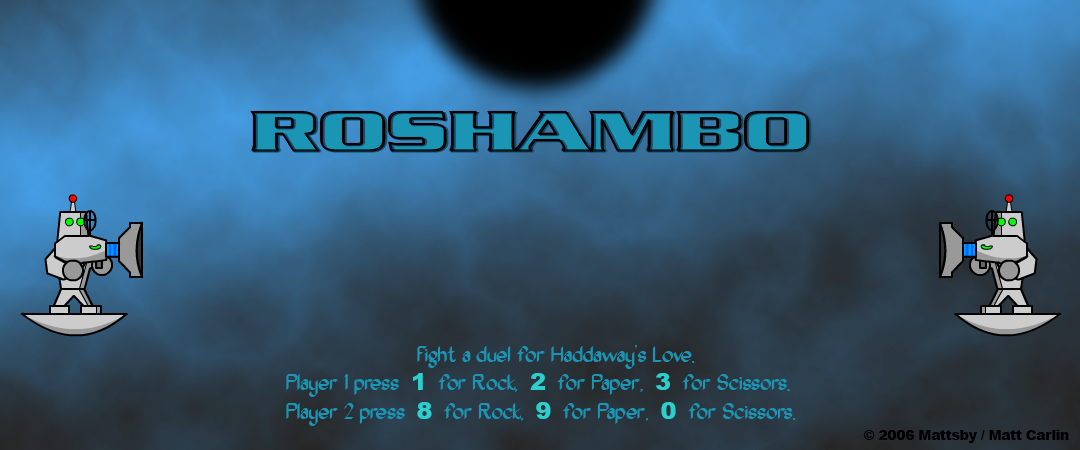
<style>
.page{position:relative;width:1080px;height:450px}
.page>*{position:absolute;margin:0}
.t1{font:24px "OakWood";letter-spacing:-0.03em;color:#1a95b4}
.t2{font:24px "Arial-Black";letter-spacing:-0.03em;color:#2ccfcd}
.t3{font:14px "Arial-Black";letter-spacing:-0.03em;color:#000000}
</style>
<div class="page">
<p class="t1" style="left:286px;top:345px;width:510px;height:81px;text-align:center">Fight a duel for Haddaway’s Love.  <br>Player 1 press  <span class="t2">1</span>  for Rock,  <span class="t2">2</span>  for Paper,  <span class="t2">3</span>  for Scissors.<br>Player 2 press  <span class="t2">8</span>  for Rock,  <span class="t2">9</span>  for Paper,  <span class="t2">0</span>  for Scissors.</p>
<p class="t3" style="left:863px;top:430px;width:206px;height:13px">© 2006 Mattsby / Matt Carlin</p>
</div>
